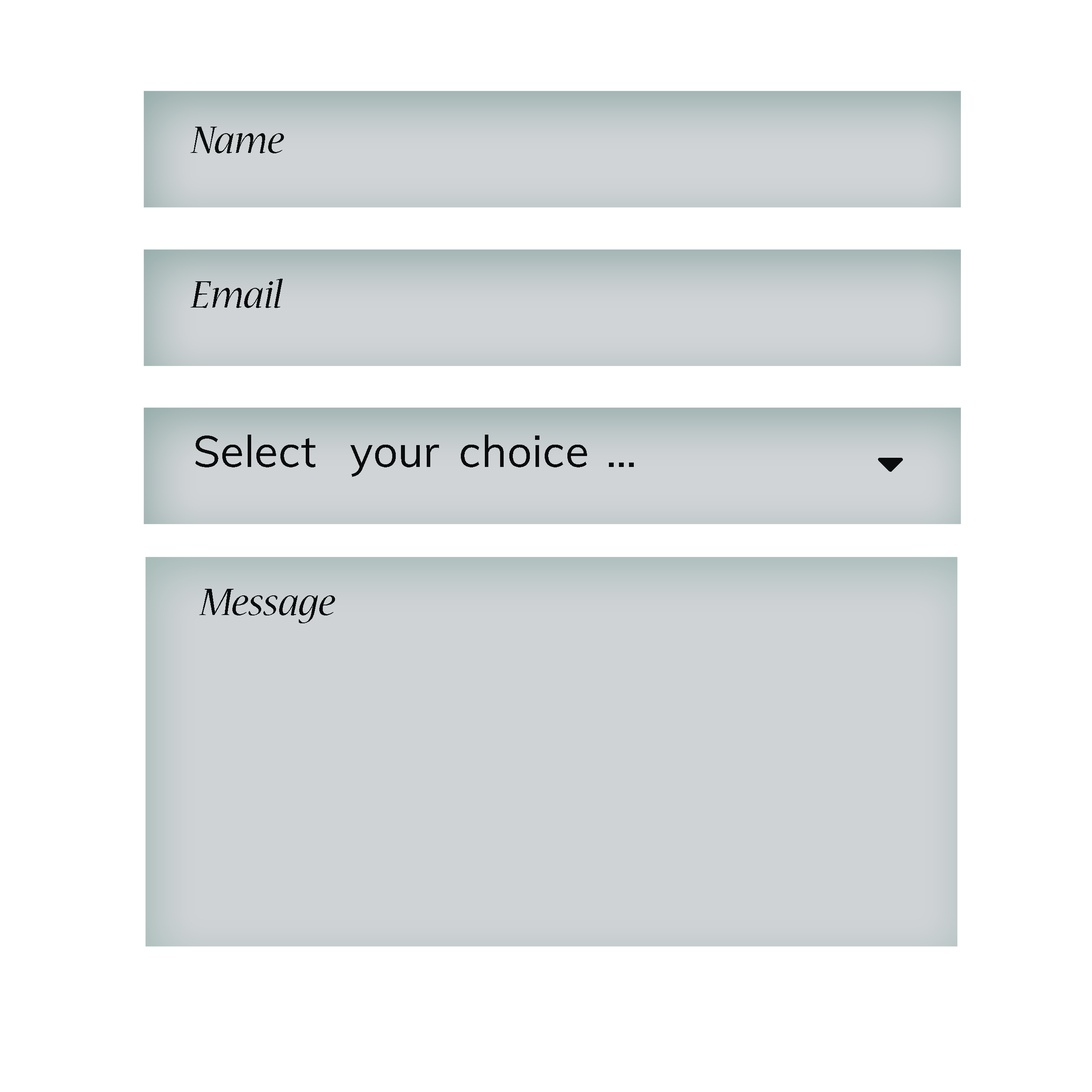
<style>
.page{position:relative;width:1092px;height:1092px;background:#ffffff}
.page>*{position:absolute;margin:0}
.t1{font:43.7px "NuevaStd-Italic";color:#0a0d0d}
.t2{font:43.7px "NuevaStd-Italic";color:#090b0c}
</style>
<div class="page">
<p class="t1" style="left:190px;top:127px;width:94px;height:26px">Name</p>
<p class="t2" style="left:190px;top:279px;width:93px;height:29px">Email</p>
<p class="t2" style="left:199px;top:589px;width:136px;height:34px">Message</p>
</div>
